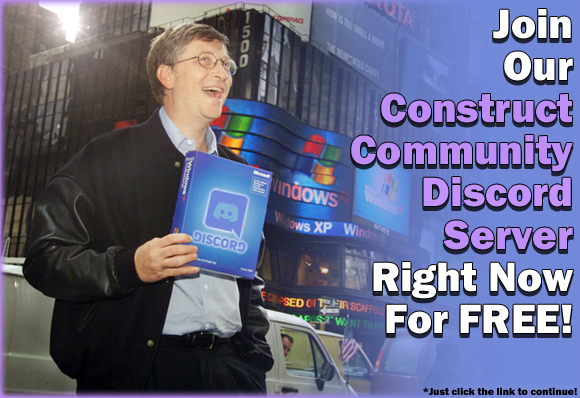
<style>
.page{position:relative;width:580px;height:398px}
.page>*{position:absolute;margin:0}
.t1{font:42.2px/42.2px "FranklinGothic-Heavy";color:#bd8ef7}
.t2{font:42.2px/42.2px "FranklinGothic-Heavy";color:#ffffff}
.t3{font:42.2px/42.2px "FranklinGothic-Heavy";color:#c393ff}
.t4{font:42.2px/42.2px "FranklinGothic-Heavy";color:#be8ff8}
.t5{font:10.5px "FranklinGothic-Heavy";color:#000000}
</style>
<div class="page">
<p class="t1" style="left:351px;top:9px;width:222px;height:325px;text-align:right"><span class="t2">Join<br>Our<br></span>Construct<br>Community<br><span class="t3"> Discord<br></span><span class="t4">Server<br></span><span class="t2">Right Now<br>For FREE!</span></p>
<p class="t5" style="left:423px;top:387px;width:154px;height:8px">*Just click the link to continue!</p>
</div>
